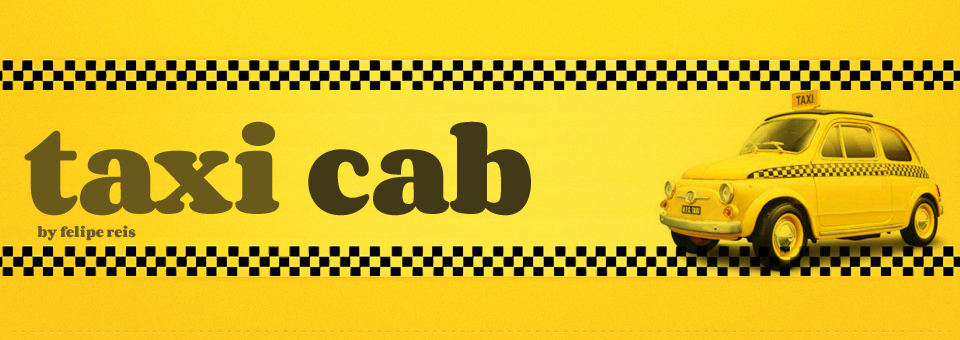
<style>
.page{position:relative;width:960px;height:340px}
.page>*{position:absolute;margin:0}
.t1{font:100px "Corben";color:#695a1b}
.t2{font:100px "Corben";color:#423917}
.t3{font:12px "Corben";color:#685b26}
</style>
<div class="page">
<p class="t1" style="left:24px;top:121px;width:507px;height:95px">taxi <span class="t2">cab</span></p>
<p class="t3" style="left:37px;top:225px;width:99px;height:16px">by felipe reis</p>
</div>
